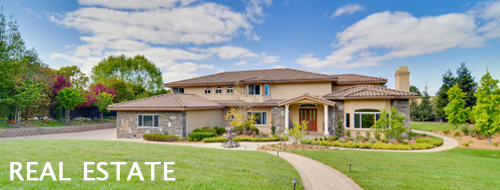
<style>
.page{position:relative;width:500px;height:190px}
.page>*{position:absolute;margin:0}
.t1{font:25.3px "LucidaSansUnicode";color:#ffffff;font-weight:bold}
</style>
<div class="page">
<p class="t1" style="left:10px;top:162px;width:166px;height:19px">REAL ESTATE</p>
</div>
